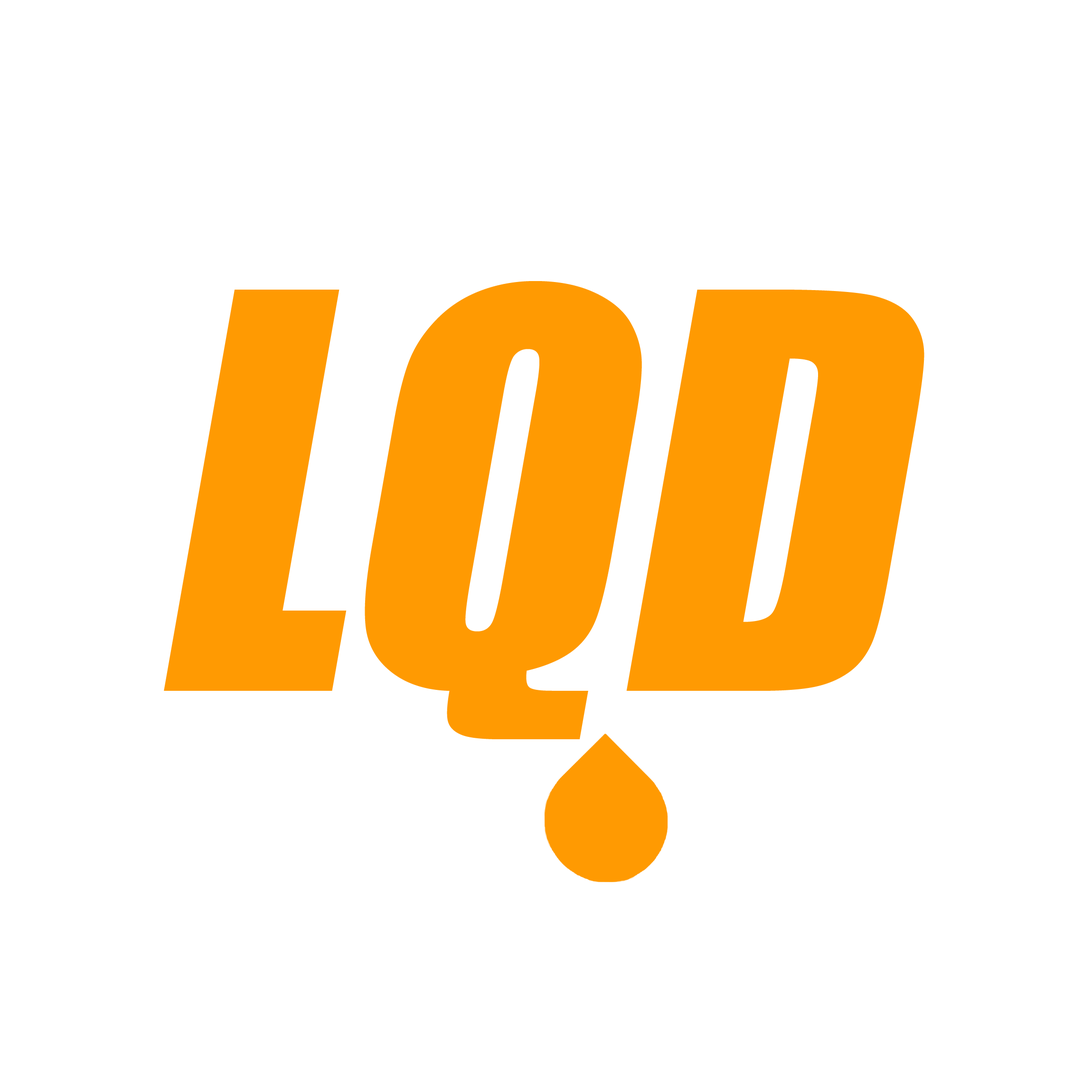
<style>
.page{position:relative;width:1092px;height:1092px;background:#ffffff}
.page>*{position:absolute;margin:0}
.t1{font:507.5px "Impact";color:#ff9a02;font-style:italic}
</style>
<div class="page">
<p class="t1" style="left:164px;top:281px;width:760px;height:458px">LQD</p>
</div>
